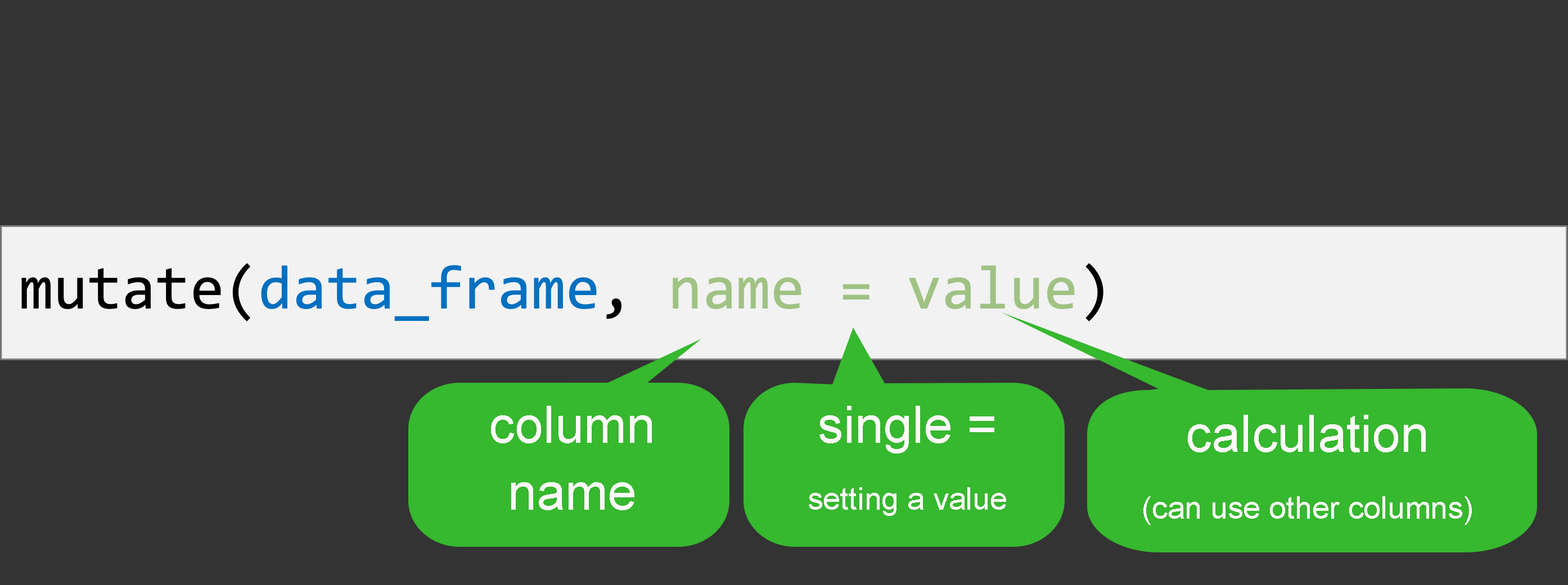
<style>
.page{position:relative;width:1568px;height:585px;background:#333333}
.page>*{position:absolute;margin:0}
.t1{font:51.6px/67px "ArialMT";color:#fff9f9}
.t2{font:30.9px/67px "ArialMT";color:#fff9f9}
</style>
<div class="page">
<p class="t1" style="left:491px;top:406px;width:161px;height:105px;text-align:center">column name</p>
<p class="t2" style="left:809px;top:406px;width:197px;height:110px;text-align:center"><span class="t1">single =</span><br>setting a value</p>
<p class="t2" style="left:1143px;top:415px;width:329px;height:110px;text-align:center"><span class="t1">calculation </span><br>(can use other columns)</p>
</div>
